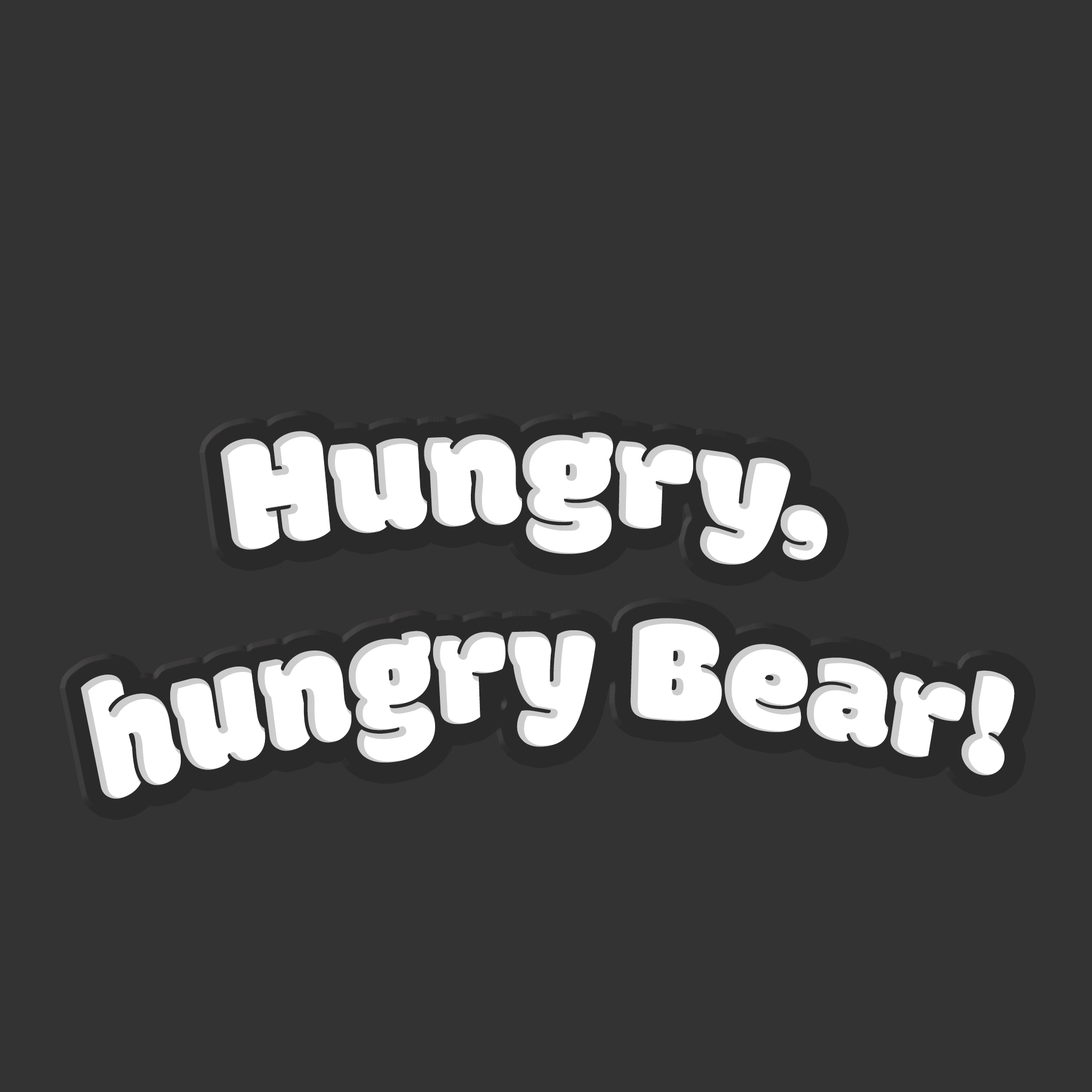
<style>
.page{position:relative;width:1092px;height:1092px;background:#333333}
.page>*{position:absolute;margin:0}
.t1{font:163.2px "Modak";color:#ffffff;scale:0.87 1}
</style>
<div class="page">
<p class="t1" style="left:81px;top:431px;width:934px;height:368px;text-align:center">Hungry, <br>hungry Bear!</p>
</div>
